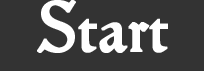
<style>
.page{position:relative;width:204px;height:71px;background:#333333}
.page>*{position:absolute;margin:0}
.t1{font:70.8px "Hamlet-Tertia18";color:#ffffff;font-weight:bold}
</style>
<div class="page">
<p class="t1" style="left:37px;top:0px;width:131px;height:53px">Start</p>
</div>
